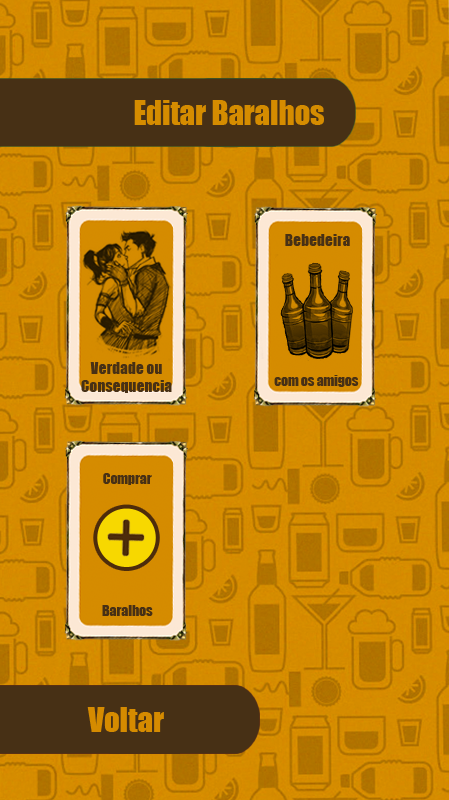
<style>
.page{position:relative;width:449px;height:800px}
.page>*{position:absolute;margin:0}
.t1{font:30.6px "Impact";color:#d58c00}
.t2{font:15.4px "Impact";color:#473015}
.t3{font:13.7px "Impact";color:#473015}
.t4{font:30.6px "Impact";color:#d58b00}
</style>
<div class="page">
<p class="t1" style="left:134px;top:100px;width:190px;height:25px">Editar Baralhos</p>
<p class="t2" style="left:285px;top:234px;width:65px;height:12px">Bebedeira</p>
<p class="t2" style="left:81px;top:362px;width:91px;height:31px;text-align:center">Verdade ou<br>Consequencia</p>
<p class="t3" style="left:274px;top:375px;width:85px;height:12px">com os amigos</p>
<p class="t3" style="left:103px;top:473px;width:49px;height:12px">Comprar</p>
<p class="t3" style="left:102px;top:605px;width:51px;height:11px">Baralhos</p>
<p class="t4" style="left:87px;top:707px;width:77px;height:25px">Voltar</p>
</div>
